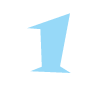
<style>
.page{position:relative;width:100px;height:100px;background:#ffffff}
.page>*{position:absolute;margin:0}
.t1{font:80.5px "SnapITC-Regular";color:#97d9f8;scale:1.06 1}
</style>
<div class="page">
<p class="t1" style="left:27px;top:13px;width:44px;height:60px">1</p>
</div>
